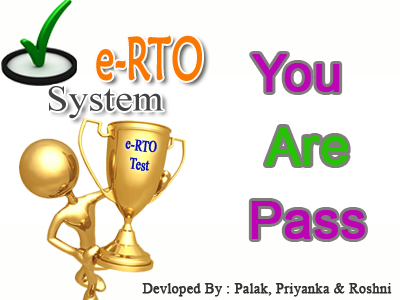
<style>
.page{position:relative;width:400px;height:300px;background:#fefefc}
.page>*{position:absolute;margin:0}
.t1{font:59.1px "MaiandraGD-Regular";color:#fa7800;font-weight:bold;scale:0.63 1}
.t2{font:51.4px/73.6px "ArialMT";color:#bb05b4;font-weight:bold}
.t3{font:51.4px/73.6px "Maruti";color:#bb05b4;font-weight:bold}
.t4{font:51.4px/73.6px "ArialMT";color:#25c206;font-weight:bold}
.t5{font:36.3px "TimesNewRomanPSMT";color:#434242;scale:1.1 1}
.t6{font:15.8px "TimesNewRomanPSMT";color:#070bb2;font-weight:bold;scale:0.7 1}
.t7{font:14.2px "TimesNewRomanPSMT";color:#313133;font-weight:bold}
</style>
<div class="page">
<p class="t1" style="left:96px;top:35px;width:106px;height:46px">e-RTO</p>
<p class="t2" style="left:251px;top:54px;width:114px;height:185px;text-align:center"><span class="t3"><br></span>You <br><span class="t4">Are<br></span>Pass</p>
<p class="t5" style="left:48px;top:86px;width:116px;height:33px">System</p>
<p class="t6" style="left:125px;top:139px;width:32px;height:32px;text-align:center;rotate:7deg">e-RTO<br>Test</p>
<p class="t7" style="left:142px;top:283px;width:250px;height:14px">Devloped By : Palak, Priyanka &amp; Roshni</p>
</div>
